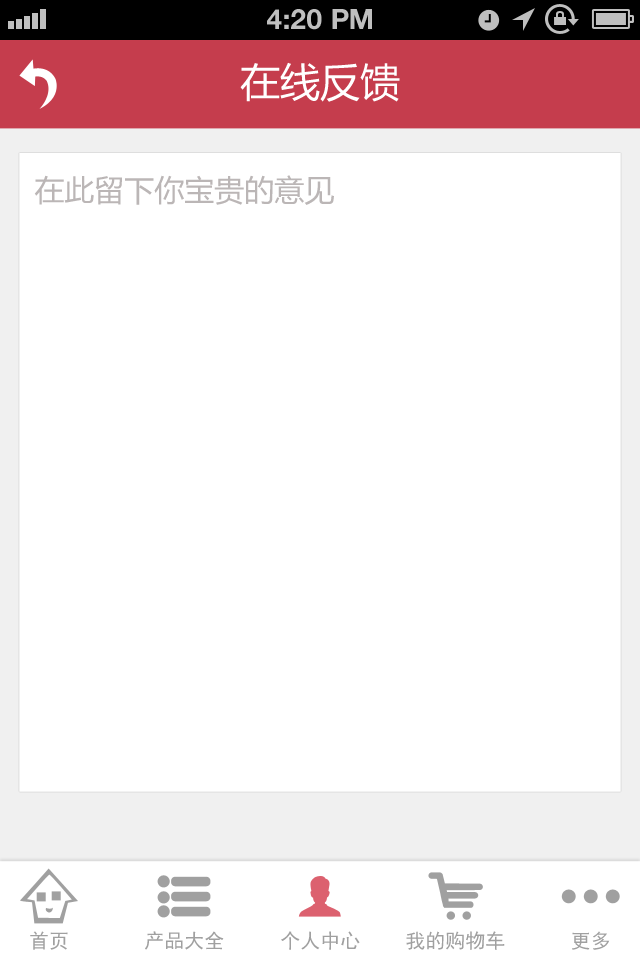
<style>
.page{position:relative;width:640px;height:960px;background:#ffffff}
.page>*{position:absolute;margin:0}
.t1{font:28px "HelveticaNeue-Bold";color:#bfbfbf;text-transform:uppercase}
.t2{font:40px "MicrosoftYaHei";color:#ffffff;text-transform:uppercase}
.t3{font:30px "MicrosoftYaHei";color:#bbb6b6;text-transform:uppercase}
.t4{font:20px "SimHei";color:#a0a0a0}
</style>
<div class="page">
<p class="t1" style="left:267px;top:9px;width:105px;height:21px">4:20 PM</p>
<p class="t2" style="left:240px;top:62px;width:160px;height:40px">在线反馈</p>
<p class="t3" style="left:34px;top:175px;width:300px;height:30px">在此留下你宝贵的意见</p>
<p class="t4" style="left:30px;top:931px;width:38px;height:19px">首页</p>
<p class="t4" style="left:145px;top:931px;width:79px;height:19px">产品大全</p>
<p class="t4" style="left:281px;top:931px;width:79px;height:19px">个人中心</p>
<p class="t4" style="left:406px;top:931px;width:99px;height:19px">我的购物车</p>
<p class="t4" style="left:572px;top:931px;width:38px;height:19px">更多</p>
</div>
